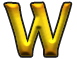
<style>
.page{position:relative;width:77px;height:59px;background:#ffffff}
.page>*{position:absolute;margin:0}
.t1{font:111.2px "Martel";letter-spacing:0.075em;scale:0.77 1}
</style>
<div class="page">
<p class="t1" style="left:5px;top:3px;width:66px;height:53px">w</p>
<p class="t1" style="left:5px;top:3px;width:66px;height:53px">w</p>
</div>
